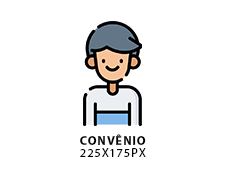
<style>
.page{position:relative;width:225px;height:175px;background:#ffffff}
.page>*{position:absolute;margin:0}
.t1{font:12.4px/12px "MyriadPro-Regular";letter-spacing:0.07em;color:#000000;text-transform:uppercase}
.t2{font:12.4px/12px "MyriadPro-Bold";letter-spacing:0.07em;color:#000000;text-transform:uppercase}
</style>
<div class="page">
<p class="t1" style="left:80px;top:134px;width:66px;height:23px;text-align:center"><span class="t2">convênio<br></span>225x175Px</p>
</div>
